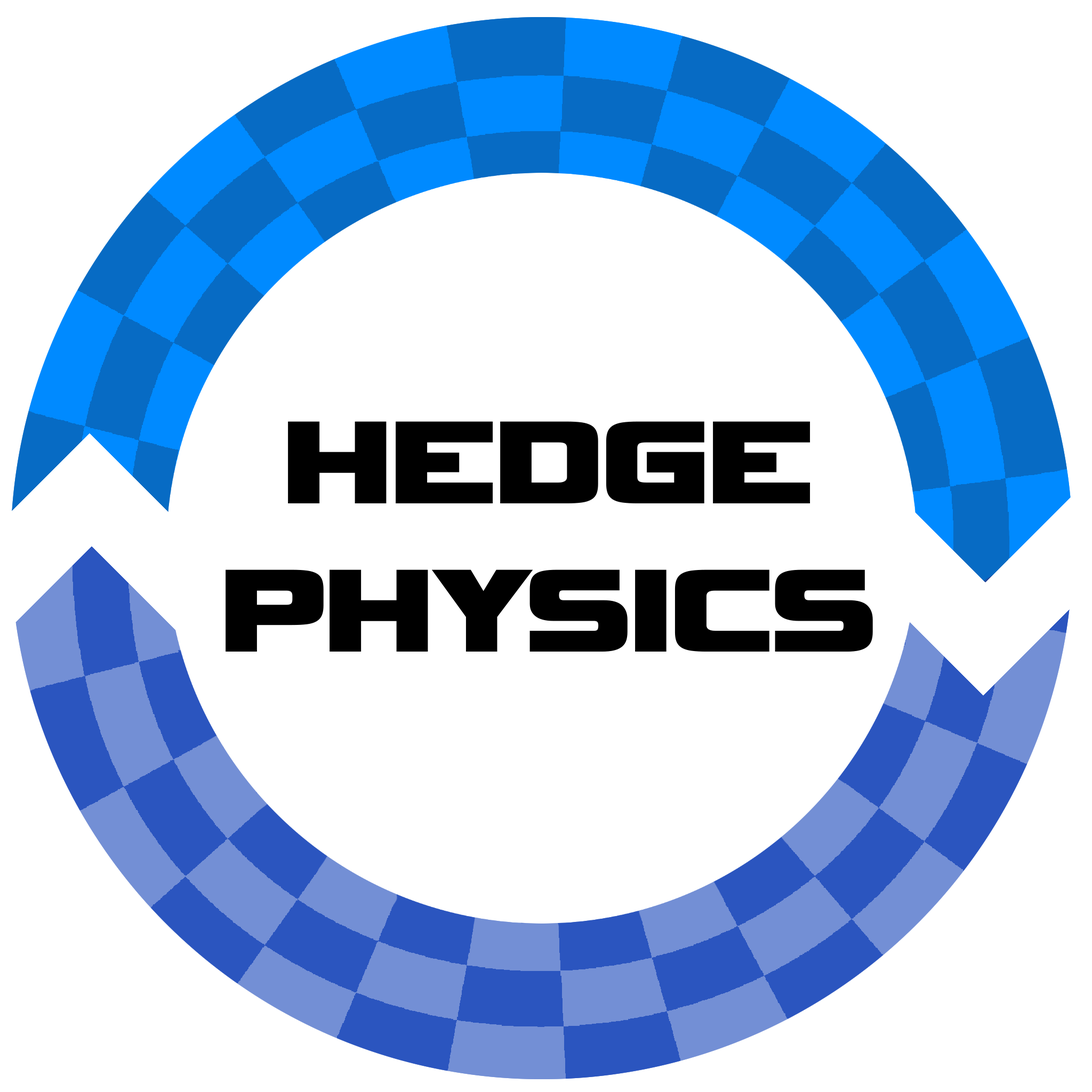
<style>
.page{position:relative;width:1092px;height:1092px;background:#ffffff}
.page>*{position:absolute;margin:0}
.t1{font:123.7px "Vipnagorgialla-Regular";letter-spacing:-0.02em;color:#000000}
</style>
<div class="page">
<p class="t1" style="left:226px;top:421px;width:647px;height:231px;text-align:center">HEDGE<br>PHYSICS</p>
</div>
